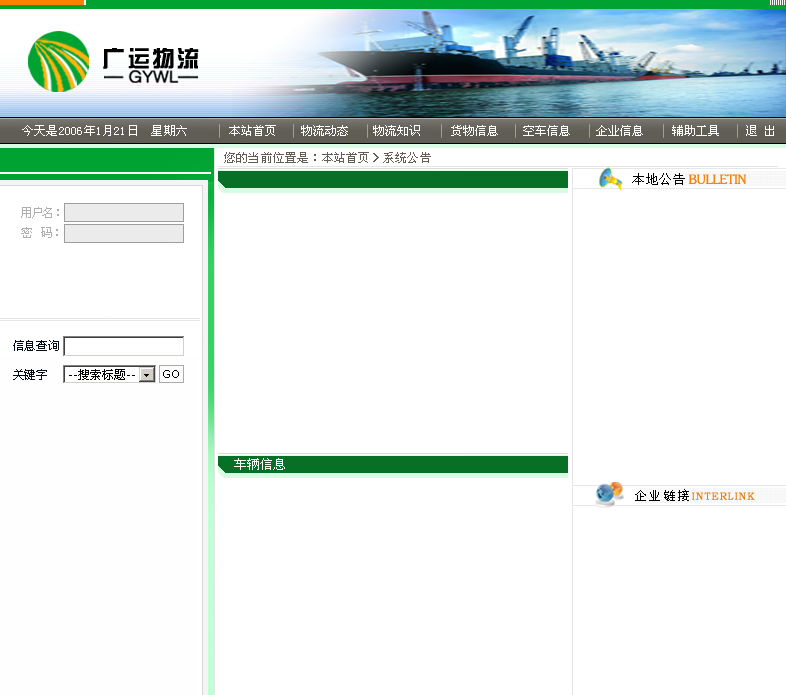
<style>
.page{position:relative;width:786px;height:695px;background:#ffffff}
.page>*{position:absolute;margin:0}
.t1{font:12px "SimSun";letter-spacing:0.02em;color:#ffffff}
.t2{font:12px "SimSun";color:#ffffff}
.t3{font:12px "SimSun";letter-spacing:0.02em;color:#605d55}
.t4{font:12px/28.5px "SimSun";letter-spacing:-0.02em;color:#040c17}
.t5{font:13px "FZZDXJW--GB1-0";letter-spacing:0.1em;color:#000000}
.t6{font:10.3px "STZhongsong";letter-spacing:0.04em;color:#e87c08;text-transform:uppercase;font-weight:bold}
</style>
<div class="page">
<p class="t1" style="left:22px;top:125px;width:165px;height:11px">今天是2006年1月21日  星期六</p>
<p class="t2" style="left:229px;top:125px;width:545px;height:11px">本站首页    物流动态　　物流知识     货物信息    空车信息    企业信息     辅助工具    退 出</p>
<p class="t3" style="left:224px;top:152px;width:207px;height:11px">您的当前位置是：本站首页＞系统公告</p>
<p class="t4" style="left:13px;top:340px;width:46px;height:40px">信息查询<br>关键字</p>
<p class="t5" style="left:635px;top:489px;width:54px;height:12px">企业链接</p>
<p class="t6" style="left:692px;top:492px;width:63px;height:8px">interlink</p>
</div>
